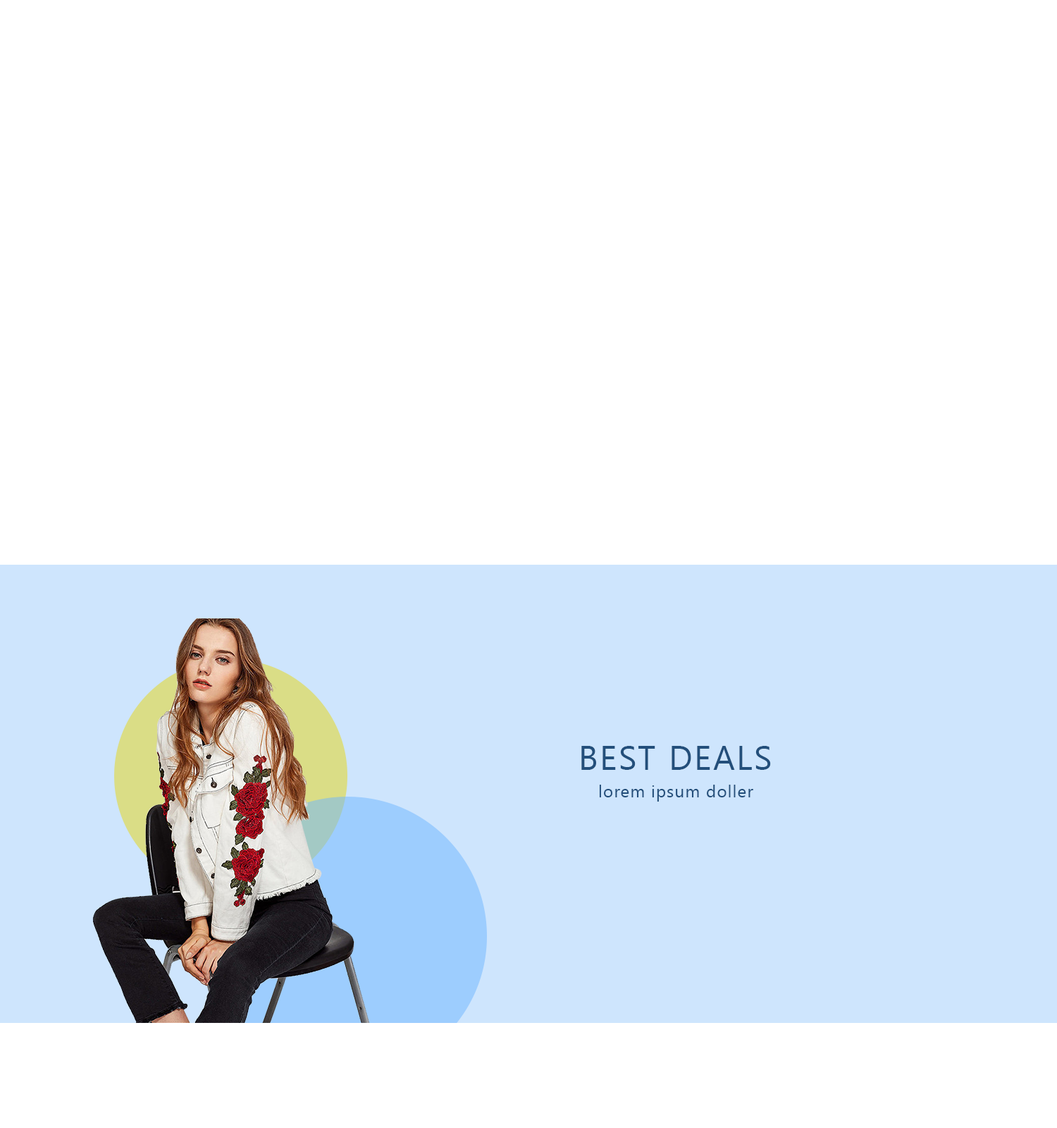
<style>
.page{position:relative;width:1057px;height:1128px;background:#ffffff}
.page>*{position:absolute;margin:0}
.t1{font:33.8px "LaoUI";letter-spacing:0.05em;color:#234f7b}
.t2{font:16.9px "LaoUI";letter-spacing:0.05em;color:#234f7b}
</style>
<div class="page">
<p class="t1" style="left:582px;top:746px;width:189px;height:24px">BEST DEALS</p>
<p class="t2" style="left:599px;top:785px;width:155px;height:16px">lorem ipsum doller</p>
</div>
